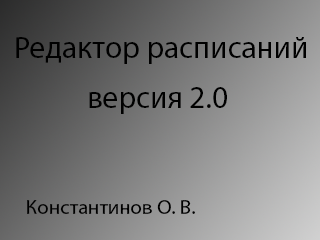
<style>
.page{position:relative;width:320px;height:240px}
.page>*{position:absolute;margin:0}
.t1{font:31.2px "MyriadPro-Regular";color:#000000}
.t2{font:20.8px "MyriadPro-Regular";color:#000000}
</style>
<div class="page">
<p class="t1" style="left:16px;top:37px;width:290px;height:27px">Редактор расписаний</p>
<p class="t1" style="left:89px;top:87px;width:138px;height:27px">версия 2.0</p>
<p class="t2" style="left:27px;top:200px;width:168px;height:14px">Константинов О. В.</p>
</div>
